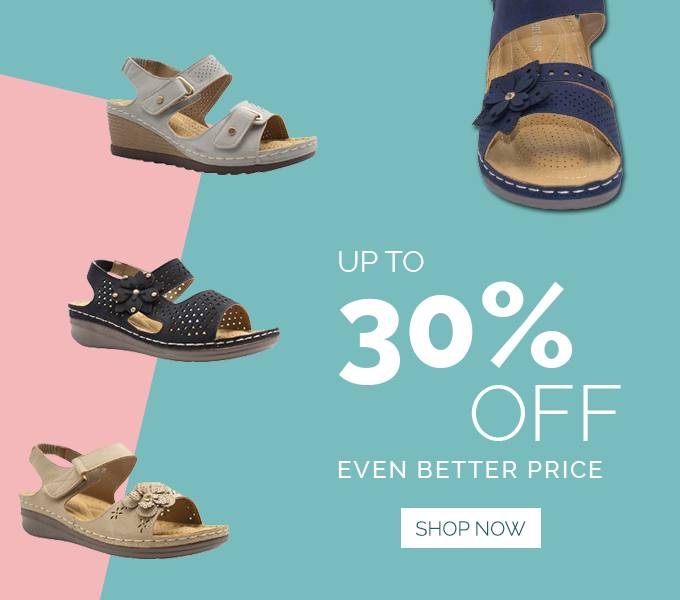
<style>
.page{position:relative;width:680px;height:600px;background:#78bcbd}
.page>*{position:absolute;margin:0}
.t1{font:30px "Raleway";color:#ffffff}
.t2{font:120px "Raleway-ExtraBold";color:#ffffff}
.t3{font:80px "Raleway-Light";color:#ffffff}
.t4{font:24px "Raleway-Medium";letter-spacing:0.08em;color:#ffffff}
.t5{font:20px "Raleway-Light";color:#1f5f60}
</style>
<div class="page">
<p class="t1" style="left:339px;top:251px;width:85px;height:21px">UP TO</p>
<p class="t2" style="left:339px;top:281px;width:234px;height:104px">30%</p>
<p class="t3" style="left:471px;top:385px;width:150px;height:56px">OFF</p>
<p class="t4" style="left:338px;top:461px;width:264px;height:17px">EVEN BETTER PRICE</p>
<p class="t5" style="left:416px;top:521px;width:110px;height:15px">SHOP NOW</p>
</div>
